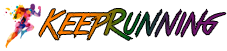
<style>
.page{position:relative;width:227px;height:51px;background:#ffffff}
.page>*{position:absolute;margin:0}
.t1{font:30px "TrueLies"}
</style>
<div class="page">
<p class="t1" style="left:39px;top:9px;width:187px;height:31px">KeepRunning</p>
</div>
